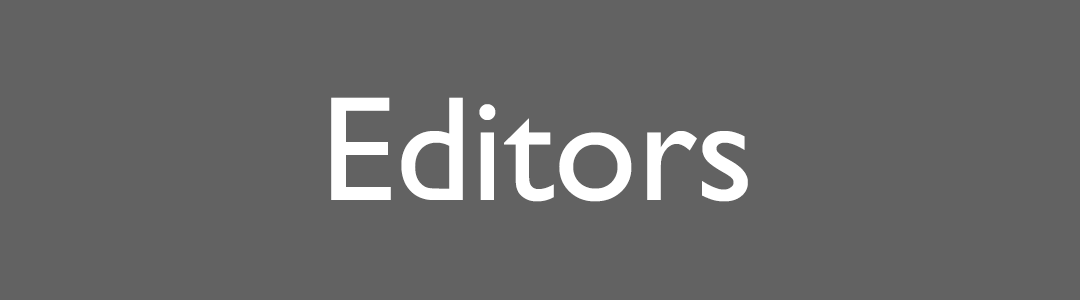
<style>
.page{position:relative;width:1080px;height:300px;background:#626262}
.page>*{position:absolute;margin:0}
.t1{font:150px "GillSansMT";color:#ffffff}
</style>
<div class="page">
<p class="t1" style="left:331px;top:97px;width:417px;height:105px">Editors</p>
</div>
